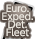
<style>
.page{position:relative;width:35px;height:39px}
.page>*{position:absolute;margin:0}
.t1{font:9px/8px "UDShinGoPro-Light";color:#ebe7df;font-weight:bold}
</style>
<div class="page">
<p class="t1" style="left:2px;top:4px;width:31px;height:33px;text-align:center">Euro.<br>Exped.<br>Det.<br>Fleet</p>
</div>
